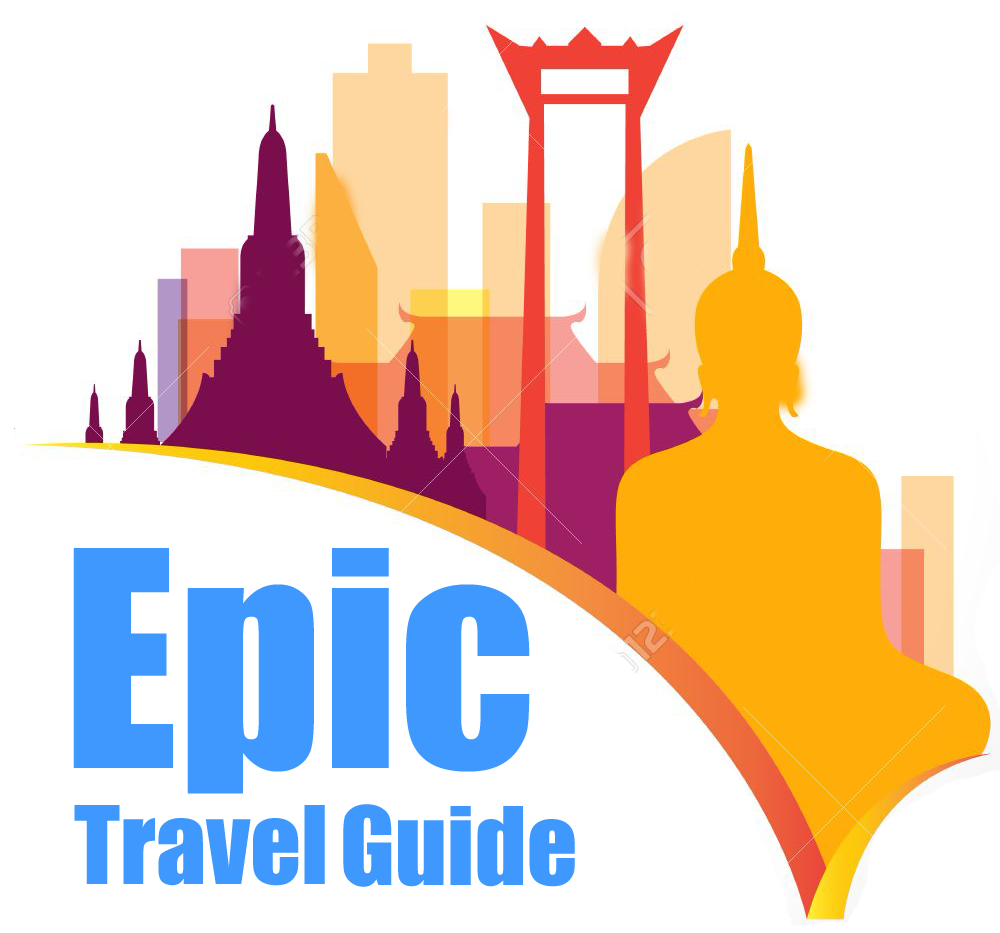
<style>
.page{position:relative;width:1000px;height:933px;background:#ffffff}
.page>*{position:absolute;margin:0}
.t1{font:277.8px "Impact";color:#3f98fd}
.t2{font:100px "Impact";color:#3f98fd}
</style>
<div class="page">
<p class="t1" style="left:73px;top:548px;width:457px;height:246px">Epic</p>
<p class="t2" style="left:74px;top:805px;width:251px;height:81px">Travel</p>
<p class="t2" style="left:343px;top:804px;width:232px;height:83px">Guide</p>
</div>
